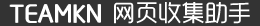
<style>
.page{position:relative;width:260px;height:26px;background:#333333}
.page>*{position:absolute;margin:0}
.t1{font:20px "RTWSYueGoTrial-Regula-yolan";color:#ffffff}
.t2{font:18px "RTWSYueGoTrial-Regula-yolan";color:#ffffff}
</style>
<div class="page">
<p class="t1" style="left:9px;top:4px;width:91px;height:20px">TEAMKN</p>
<p class="t1" style="left:10px;top:4px;width:91px;height:20px">TEAMKN</p>
<p class="t2" style="left:114px;top:1px;width:136px;height:23px">网页收集助手</p>
</div>
